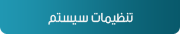
<style>
.page{position:relative;width:180px;height:35px}
.page>*{position:absolute;margin:0}
.t1{font:14px "Mj_Flow";letter-spacing:-0.001em;color:#f1f2f2}
</style>
<div class="page">
<p class="t1" style="left:48px;top:12px;width:85px;height:13px">تنظیمات سیستم</p>
</div>
